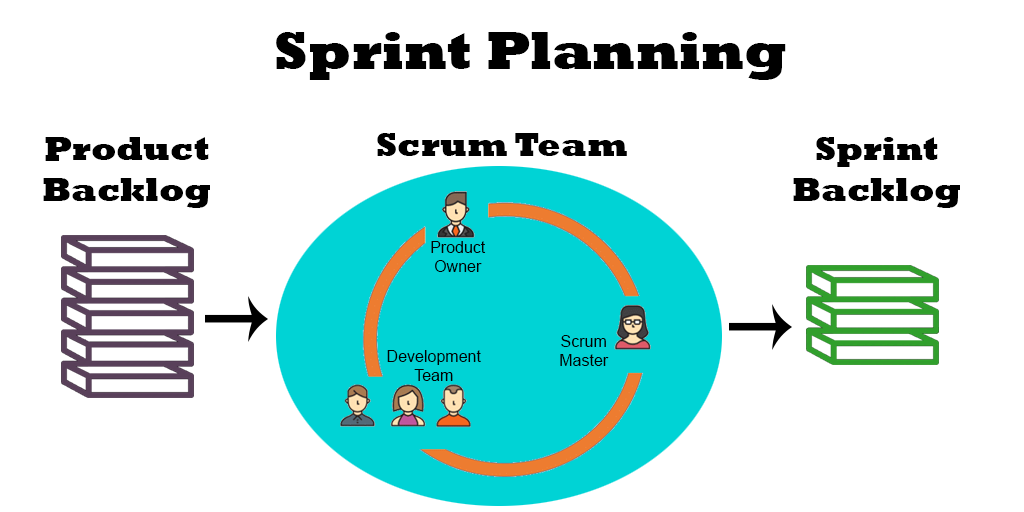
<style>
.page{position:relative;width:1024px;height:512px;background:#ffffff}
.page>*{position:absolute;margin:0}
.t1{font:54px "Rockwell-ExtraBold";color:#000000}
.t2{font:34px "Rockwell-ExtraBold";color:#000000}
.t3{font:16px "ArialMT";color:#000000}
</style>
<div class="page">
<p class="t1" style="left:276px;top:32px;width:510px;height:48px">Sprint Planning</p>
<p class="t2" style="left:43px;top:137px;width:167px;height:71px;text-align:center">Product<br>Backlog</p>
<p class="t2" style="left:377px;top:133px;width:250px;height:23px">Scrum Team</p>
<p class="t2" style="left:793px;top:137px;width:167px;height:71px;text-align:center">Sprint<br>Backlog</p>
<p class="t3" style="left:431px;top:241px;width:55px;height:31px;text-align:center">Product<br>Owner</p>
<p class="t3" style="left:560px;top:335px;width:49px;height:31px;text-align:center">Scrum<br>Master</p>
<p class="t3" style="left:387px;top:350px;width:94px;height:31px;text-align:center">Development<br>Team</p>
</div>
